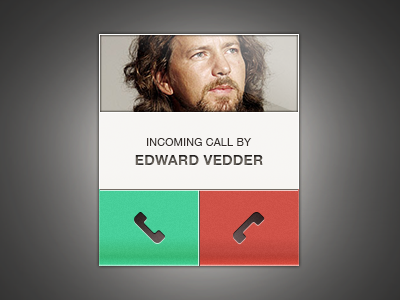
<style>
.page{position:relative;width:400px;height:300px}
.page>*{position:absolute;margin:0}
.t1{font:11px "HelveticaNeue";letter-spacing:0.02em;color:#352e2a;text-transform:uppercase}
.t2{font:14px "HelveticaNeue-Bold";letter-spacing:0.03em;text-transform:uppercase}
</style>
<div class="page">
<p class="t1" style="left:147px;top:138px;width:105px;height:8px">Incoming call by</p>
<p class="t2" style="left:135px;top:155px;width:128px;height:10px">Edward Vedder</p>
</div>
